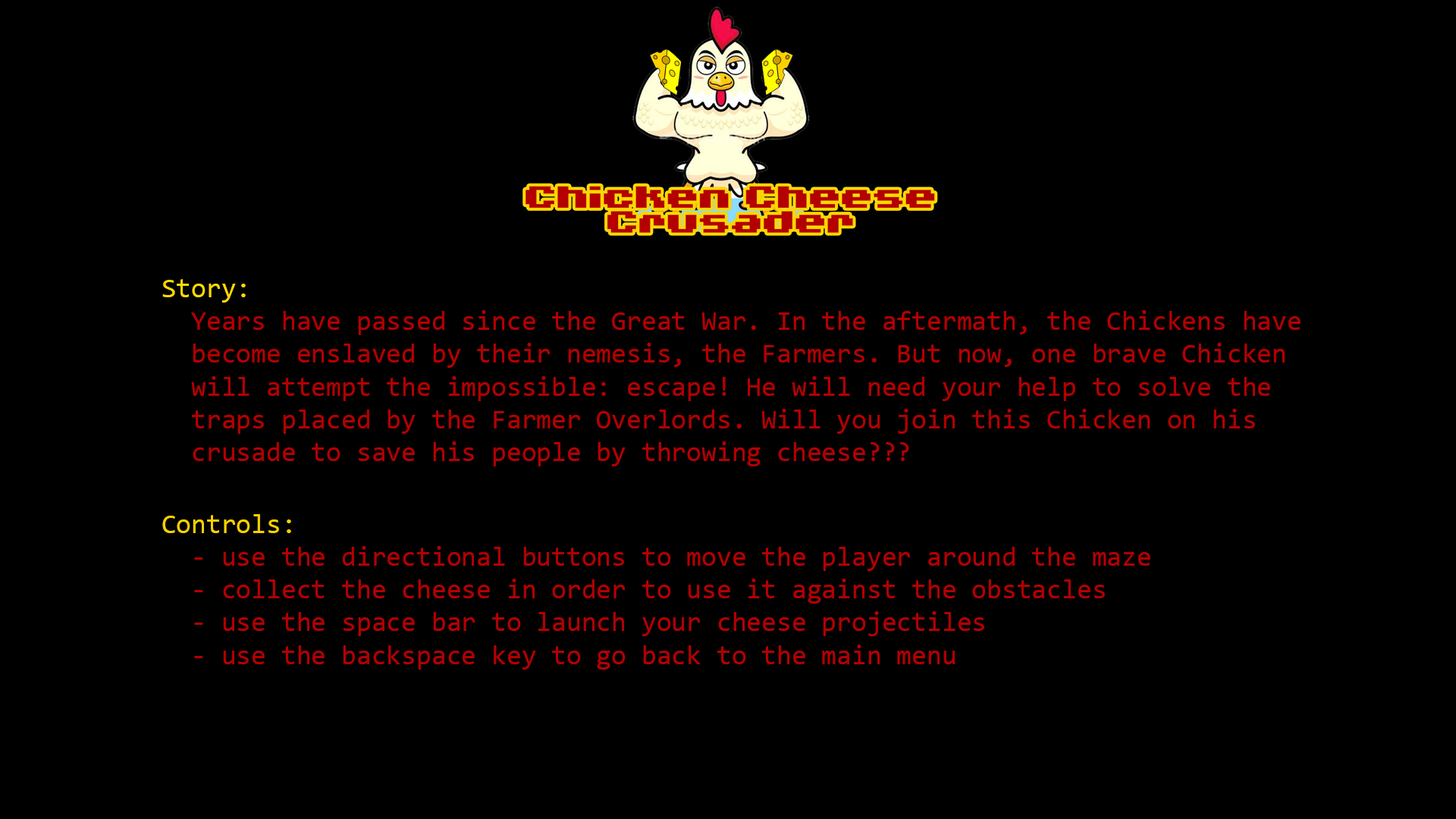
<style>
.page{position:relative;width:1456px;height:819px;background:#000000}
.page>*{position:absolute;margin:0}
.t1{font:27.3px "Consolas";color:#b40001}
.t2{font:27.3px "Consolas";color:#ffda00}
.t3{font:27.3px "Consolas";color:#fcd100}
</style>
<div class="page">
<p class="t1" style="left:162px;top:279px;width:1139px;height:187px"><span class="t2">Story:<br></span>  Years have passed since the Great War. In the aftermath, the Chickens have<br>  become enslaved by their nemesis, the Farmers. But now, one brave Chicken<br>  will attempt the impossible: escape! He will need your help to solve the<br>  traps placed by the Farmer Overlords. Will you join this Chicken on his<br>  crusade to save his people by throwing cheese???</p>
<p class="t1" style="left:162px;top:514px;width:988px;height:156px"><span class="t3">Controls:<br>  </span>- use the directional buttons to move the player around the maze<br>  - collect the cheese in order to use it against the obstacles<br>  - use the space bar to launch your cheese projectiles<br>  - use the backspace key to go back to the main menu</p>
</div>
